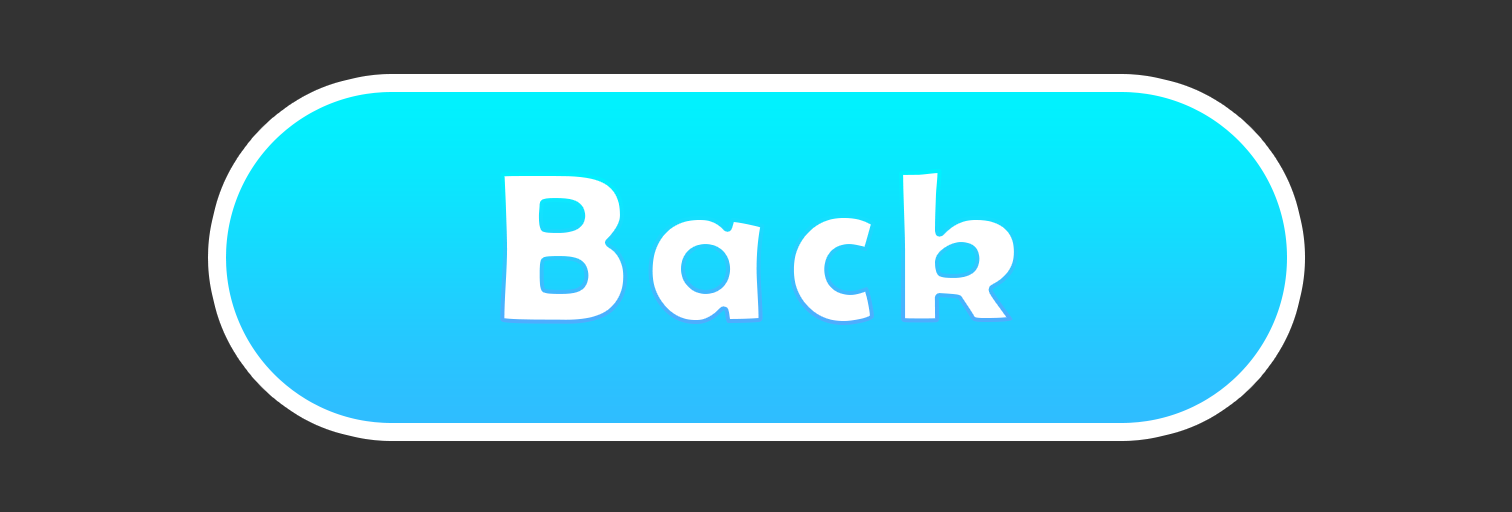
<style>
.page{position:relative;width:1512px;height:512px;background:#333333}
.page>*{position:absolute;margin:0}
.t1{font:218.9px "BerlinSansFBDemi-Bold";letter-spacing:0.06em;color:#ffffff}
</style>
<div class="page">
<p class="t1" style="left:500px;top:169px;width:518px;height:156px">Back</p>
</div>
